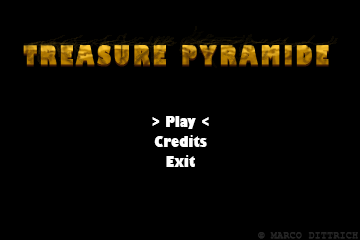
<style>
.page{position:relative;width:360px;height:240px;background:#000000}
.page>*{position:absolute;margin:0}
.t1{font:14.5px/20px "GillSans-UltraBoldCondensed";letter-spacing:0.002em;color:#fefefe;scale:1.17 1}
.t2{font:8.5px "CourierNewPSMT";letter-spacing:0.002em;color:#252525;font-weight:bold;scale:1.17 1}
</style>
<div class="page">
<p class="t1" style="left:152px;top:116px;width:57px;height:51px;text-align:center">&gt; Play &lt;<br>Credits<br>Exit</p>
<p class="t2" style="left:258px;top:232px;width:100px;height:7px">© MARCO DITTRICH</p>
</div>
